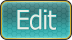
<style>
.page{position:relative;width:72px;height:40px}
.page>*{position:absolute;margin:0}
.t1{font:26px "Meiryo";letter-spacing:-0.04em;color:#e7eee6;scale:0.9 1}
</style>
<div class="page">
<p class="t1" style="left:17px;top:9px;width:39px;height:21px">Edit</p>
</div>
